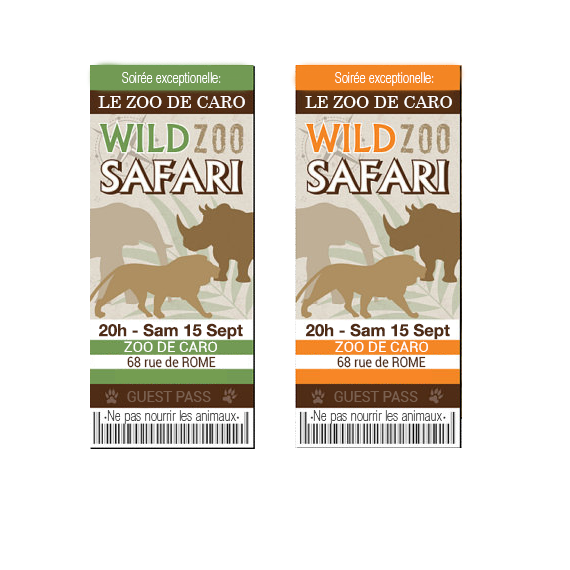
<style>
.page{position:relative;width:570px;height:570px;background:#ffffff}
.page>*{position:absolute;margin:0}
.t1{font:14.5px "HelveticaNeueLTStd-ThCn";color:#ffffff}
.t2{font:16.7px "Century";color:#ffffff}
.t3{font:16.7px "HelveticaNeueLTStd-Bd";color:#4f2c16}
.t4{font:13.9px "Roboto-Regular";color:#ffffff;scale:1.08 1}
.t5{font:13.9px "Roboto-Regular";color:#4f2c16;scale:0.89 1}
.t6{font:14.5px "Roboto-Regular";color:#7b6150}
.t7{font:14.6px "HelveticaNeueLTStd-ThCn";color:#4a4a4a}
</style>
<div class="page">
<p class="t1" style="left:122px;top:72px;width:99px;height:14px">Soirée exceptionelle:</p>
<p class="t1" style="left:335px;top:72px;width:99px;height:14px">Soirée exceptionelle:</p>
<p class="t2" style="left:98px;top:96px;width:147px;height:12px">LE ZOO DE CARO</p>
<p class="t2" style="left:305px;top:96px;width:147px;height:12px">LE ZOO DE CARO</p>
<p class="t3" style="left:99px;top:323px;width:144px;height:17px">20h - Sam 15 Sept</p>
<p class="t3" style="left:306px;top:323px;width:144px;height:17px">20h - Sam 15 Sept</p>
<p class="t4" style="left:124px;top:341px;width:93px;height:11px">ZOO DE CARO</p>
<p class="t4" style="left:335px;top:341px;width:93px;height:11px">ZOO DE CARO</p>
<p class="t5" style="left:127px;top:356px;width:89px;height:12px">68 rue de ROME</p>
<p class="t5" style="left:337px;top:356px;width:89px;height:12px">68 rue de ROME</p>
<p class="t6" style="left:127px;top:391px;width:84px;height:11px">GUEST PASS</p>
<p class="t6" style="left:334px;top:391px;width:84px;height:11px">GUEST PASS</p>
<p class="t7" style="left:107px;top:410px;width:129px;height:14px">Ne pas nourrir les animaux</p>
<p class="t7" style="left:313px;top:410px;width:129px;height:14px">Ne pas nourrir les animaux</p>
</div>
